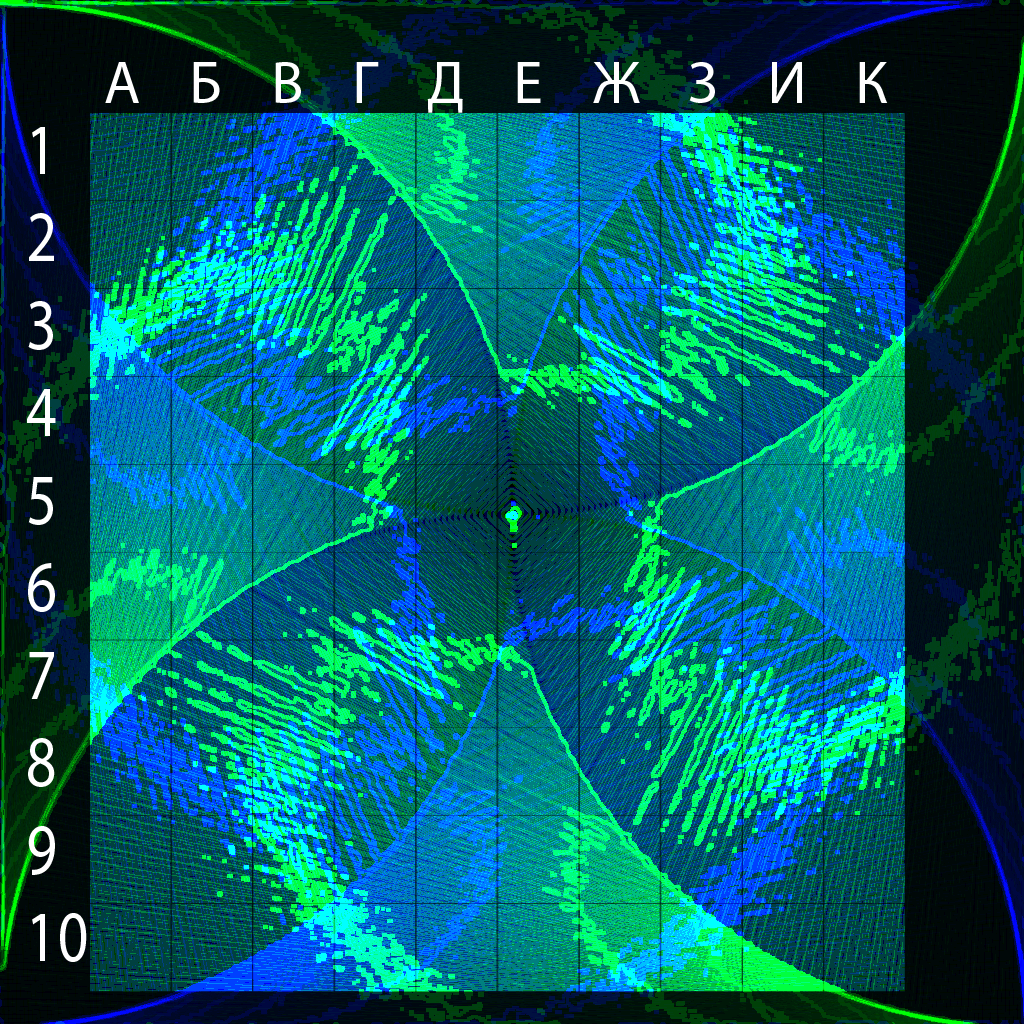
<style>
.page{position:relative;width:1024px;height:1024px}
.page>*{position:absolute;margin:0}
.t1{font:60px "MyriadPro-Regular";letter-spacing:0.3em;color:#ffffff}
.t2{font:72.9px "MyriadPro-Regular";letter-spacing:0.3em;color:#ffffff;scale:0.82 1}
.t3{font:72.9px "MyriadPro-Regular";letter-spacing:0.02em;color:#ffffff;scale:0.82 1}
</style>
<div class="page">
<p class="t1" style="left:105px;top:62px;width:783px;height:51px">A Б В Г Д Е Ж З И К</p>
<p class="t2" style="left:27px;top:127px;width:60px;height:835px">1<br>2 3 4 5 6 7 8 9 <span class="t3">10</span></p>
</div>
